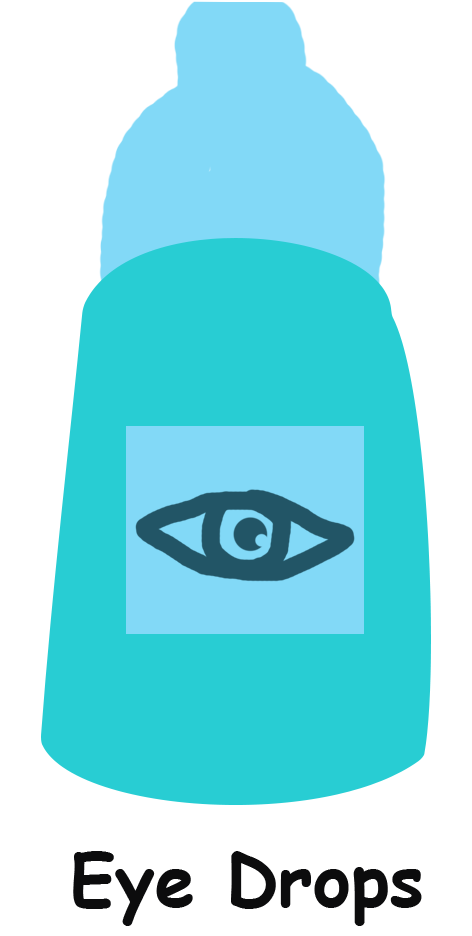
<style>
.page{position:relative;width:472px;height:936px;background:#ffffff}
.page>*{position:absolute;margin:0}
.t1{font:72px "ComicSansMS-Bold";color:#0c0c0d}
</style>
<div class="page">
<p class="t1" style="left:73px;top:851px;width:349px;height:75px">Eye Drops</p>
</div>
